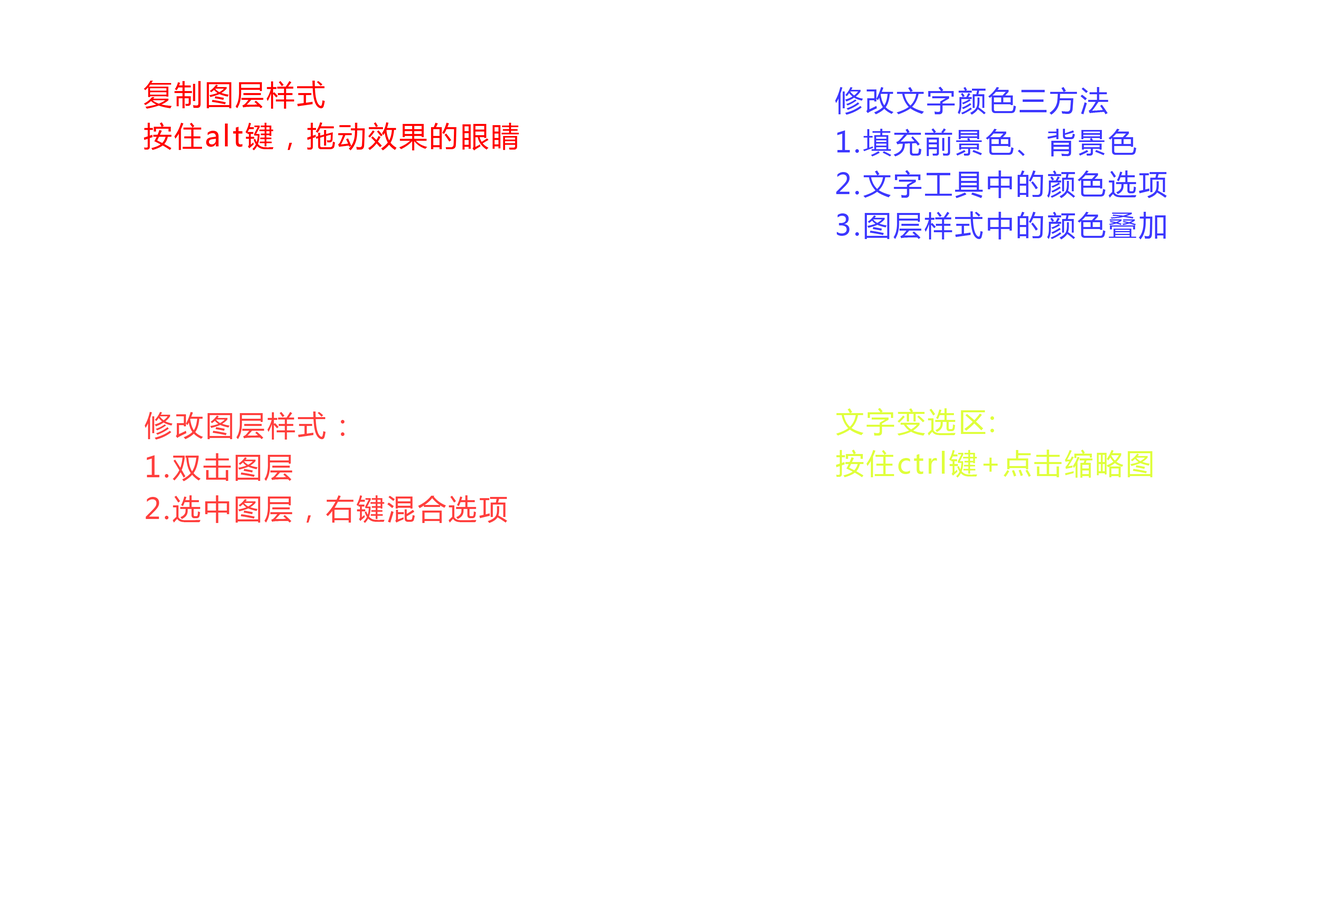
<style>
.page{position:relative;width:1326px;height:900px;background:#ffffff}
.page>*{position:absolute;margin:0}
.t1{font:28.4px/41.6px "MicrosoftYaHei";letter-spacing:0.08em;color:#ff0200}
.t2{font:28.4px/41.6px "MicrosoftYaHei";letter-spacing:0.08em;color:#3d38ff}
.t3{font:28.4px/41.6px "MicrosoftYaHei";letter-spacing:0.08em;color:#ff3f3d}
.t4{font:28.4px/41.6px "MicrosoftYaHei";letter-spacing:0.08em;color:#dfff3b}
</style>
<div class="page">
<p class="t1" style="left:144px;top:81px;width:375px;height:69px;text-align:justify">复制图层样式<br>按住alt键，拖动效果的眼睛</p>
<p class="t2" style="left:835px;top:87px;width:331px;height:152px;text-align:justify">修改文字颜色三方法<br>1.填充前景色、背景色<br>2.文字工具中的颜色选项<br>3.图层样式中的颜色叠加</p>
<p class="t3" style="left:145px;top:411px;width:362px;height:112px;text-align:justify">修改图层样式：<br>1.双击图层<br>2.选中图层，右键混合选项</p>
<p class="t4" style="left:836px;top:408px;width:316px;height:69px;text-align:justify">文字变选区:<br>按住ctrl键+点击缩略图</p>
</div>
